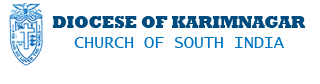
<style>
.page{position:relative;width:320px;height:84px;background:#ffffff}
.page>*{position:absolute;margin:0}
.t1{font:16.6px "Rockwell-ExtraBold";color:#014d7e}
.t2{font:16.6px "LucidaConsole";color:#0076c3}
</style>
<div class="page">
<p class="t1" style="left:52px;top:16px;width:253px;height:12px">DIOCESE OF KARIMNAGAR</p>
<p class="t2" style="left:74px;top:37px;width:210px;height:11px">CHURCH OF SOUTH INDIA</p>
</div>
